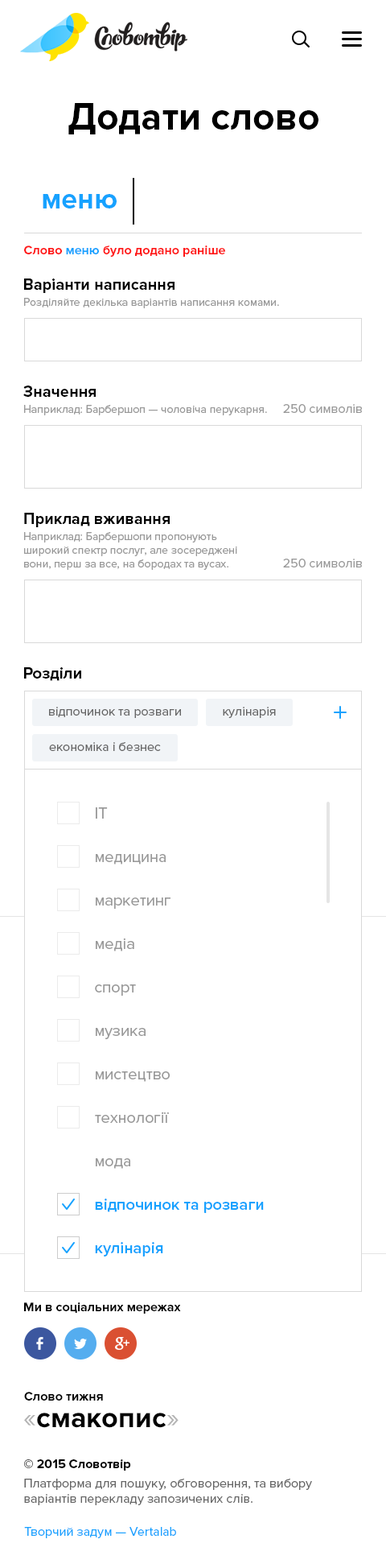
<style>
.page{position:relative;width:386px;height:1568px;background:#ffffff}
.page>*{position:absolute;margin:0}
.t1{font:38.6px "ProximaNova-Bold";color:#000000}
.t2{font:29px "ProximaNova-Bold";color:#17a2ff}
.t3{font:12.9px "ProximaNova-Bold";color:#ff1717}
.t4{font:12.9px "ProximaNova-Bold";color:#17a2ff}
.t5{font:16.1px "ProximaNova-Bold";color:#000000}
.t6{font:11.3px "ProximaNova-Regular";color:#999999}
.t7{font:12.9px "ProximaNova-Regular";color:#999999}
.t8{font:12.9px "ProximaNova-Regular";color:#666666}
.t9{font:16.1px/43.5px "ProximaNova-Regular";color:#999999}
.t10{font:16.1px/43.5px "ProximaNova-Semibold";color:#17a2ff}
.t11{font:12.9px "ProximaNova-Bold";color:#010101}
.t12{font:29px "ProximaNova-Bold";color:#000000}
.t13{font:29px "ProximaNova-Regular";color:#b3b3b3}
.t14{font:12.9px/17.7px "ProximaNova-Bold";color:#000000}
.t15{font:12.9px/19.3px "ProximaNova-Regular";color:#666666}
.t16{font:12.9px "ProximaNova-Regular";color:#17a2ff}
</style>
<div class="page">
<p class="t1" style="left:68px;top:103px;width:251px;height:31px">Додати слово</p>
<p class="t2" style="left:43px;top:194px;width:74px;height:14px">меню</p>
<p class="t3" style="left:24px;top:246px;width:201px;height:11px">Слово <span class="t4">меню</span> було додано раніше</p>
<p class="t5" style="left:24px;top:279px;width:151px;height:14px">Варіанти написання</p>
<p class="t6" style="left:24px;top:298px;width:255px;height:10px">Розділяйте декілька варіантів написання комами.</p>
<p class="t5" style="left:23px;top:386px;width:73px;height:11px">Значення</p>
<p class="t6" style="left:24px;top:405px;width:243px;height:10px">Наприклад: Барбершоп — чоловіча перукарня.</p>
<p class="t7" style="left:283px;top:404px;width:79px;height:9px">250 символів</p>
<p class="t5" style="left:24px;top:513px;width:146px;height:14px">Приклад вживання</p>
<p class="t6" style="left:24px;top:532px;width:213px;height:38px">Наприклад: Барбершопи пропонують<br>широкий спектр послуг, але зосереджені<br>вони, перш за все, на бородах та вусах.</p>
<p class="t7" style="left:283px;top:559px;width:79px;height:8px">250 символів</p>
<p class="t5" style="left:24px;top:667px;width:57px;height:14px">Розділи</p>
<p class="t8" style="left:49px;top:707px;width:132px;height:11px">відпочинок та розваги</p>
<p class="t8" style="left:223px;top:707px;width:53px;height:11px">кулінарія</p>
<p class="t8" style="left:49px;top:742px;width:112px;height:9px">економіка і безнес</p>
<p class="t9" style="left:95px;top:807px;width:169px;height:449px">IT<br>медицина<br>маркетинг<br>медіа<br>спорт<br>музика<br>мистецтво<br>технології<br>мода<br><span class="t10">відпочинок та розваги<br>кулінарія</span></p>
<p class="t11" style="left:24px;top:1302px;width:157px;height:12px">Ми в соціальних мережах</p>
<p class="t11" style="left:24px;top:1392px;width:79px;height:9px">Слово тижня</p>
<p class="t12" style="left:24px;top:1413px;width:155px;height:15px"><span class="t13">«</span>смакопис<span class="t13">»</span></p>
<p class="t8" style="left:24px;top:1459px;width:288px;height:46px"><span class="t14">© 2015 Словотвір<br></span><span class="t15">Платформа для пошуку, обговорення, </span>та вибору<br>варіантів перекладу запозичених слів.</p>
<p class="t16" style="left:24px;top:1527px;width:152px;height:11px">Творчий задум — Vertalab</p>
</div>
